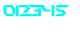
<style>
.page{position:relative;width:80px;height:32px;background:#ffffff}
.page>*{position:absolute;margin:0}
.t1{font:16px "PerfectDark(BRK)";color:#00f9f5}
</style>
<div class="page">
<p class="t1" style="left:3px;top:5px;width:67px;height:12px">012345</p>
</div>
